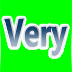
<style>
.page{position:relative;width:72px;height:72px;background:#00ff00}
.page>*{position:absolute;margin:0}
.t1{font:39.3px "Ebrima-Bold";scale:0.74 1}
</style>
<div class="page">
<p class="t1" style="left:4px;top:18px;width:63px;height:38px">Very</p>
</div>
